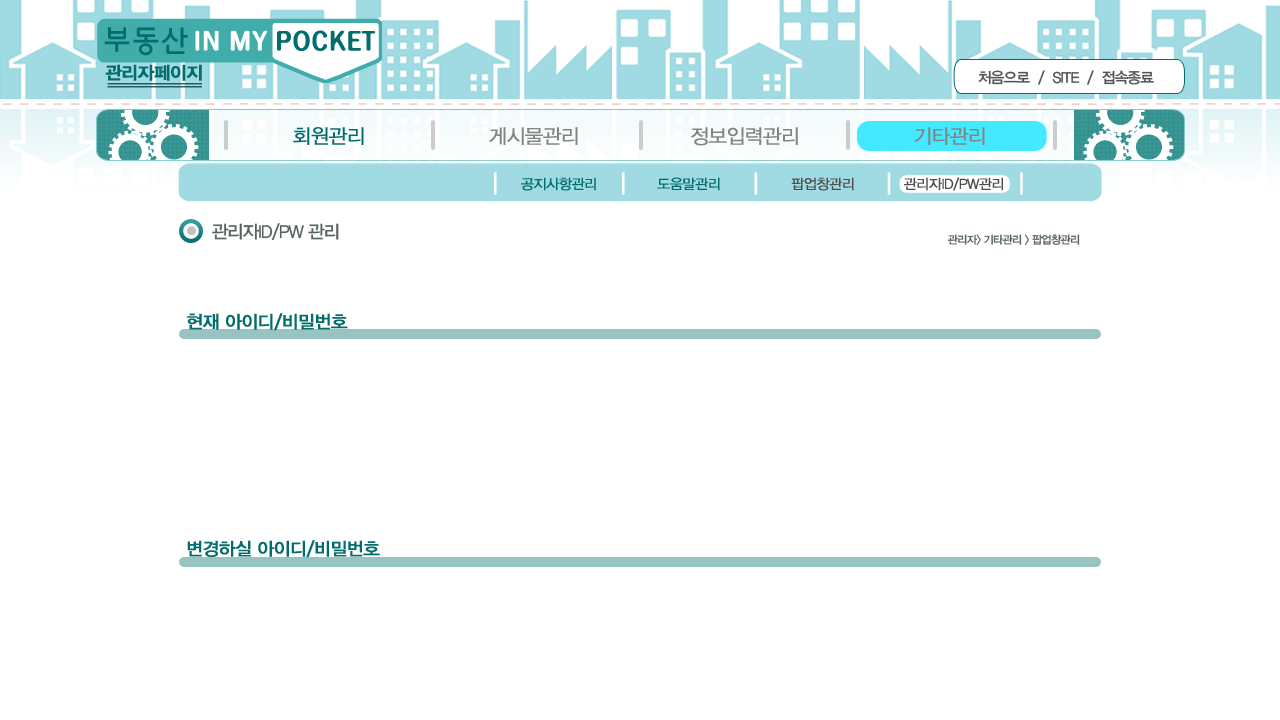
<style>
.page{position:relative;width:1280px;height:720px;background:#ffffff}
.page>*{position:absolute;margin:0}
.t1{font:17.8px "YDIYGO340";letter-spacing:-0.04em;color:#036d6d;font-weight:bold}
.t2{font:15px "YDIYGO330";letter-spacing:-0.06em;color:#535353}
.t3{font:20px "YDIYGO320";letter-spacing:-0.04em;color:#036d6d;font-weight:bold}
.t4{font:20px "YDIYGO320";letter-spacing:-0.04em;color:#838383;font-weight:bold}
.t5{font:14px "YDIYGO320";letter-spacing:-0.04em;color:#036d6d;font-weight:bold}
.t6{font:14px "YDIYGO320";letter-spacing:-0.04em;color:#4f4f4f;font-weight:bold}
.t7{font:18px "YDIYGO330";letter-spacing:-0.06em;color:#576262}
.t8{font:11px "YDIYGO330";letter-spacing:-0.06em;color:#576262}
.t9{font:18px "YDIYGO330";letter-spacing:-0.04em;color:#036d6d;font-weight:bold}
</style>
<div class="page">
<p class="t1" style="left:105px;top:64px;width:97px;height:17px">관리자페이지</p>
<p class="t2" style="left:978px;top:70px;width:176px;height:15px">처음으로  /  SITE  /  접속종료</p>
<p class="t3" style="left:293px;top:127px;width:71px;height:18px">회원관리</p>
<p class="t4" style="left:489px;top:127px;width:89px;height:18px">게시물관리</p>
<p class="t4" style="left:691px;top:127px;width:107px;height:19px">정보입력관리</p>
<p class="t4" style="left:914px;top:127px;width:71px;height:18px">기타관리</p>
<p class="t5" style="left:521px;top:177px;width:75px;height:14px">공지사항관리</p>
<p class="t5" style="left:657px;top:177px;width:63px;height:14px">도움말관리</p>
<p class="t6" style="left:791px;top:177px;width:63px;height:14px">팝업창관리</p>
<p class="t6" style="left:904px;top:177px;width:99px;height:14px">관리자ID/PW관리</p>
<p class="t7" style="left:212px;top:223px;width:127px;height:18px">관리자ID/PW 관리</p>
<p class="t8" style="left:947px;top:234px;width:133px;height:12px">관리자&gt; 기타관리 &gt; 팝업창관리</p>
<p class="t9" style="left:187px;top:313px;width:161px;height:18px">현재 아이디/비밀번호</p>
<p class="t9" style="left:187px;top:540px;width:193px;height:18px">변경하실 아이디/비밀번호</p>
</div>
